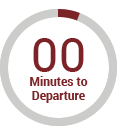
<style>
.page{position:relative;width:117px;height:126px;background:#ffffff}
.page>*{position:absolute;margin:0}
.t1{font:48px "Roboto-Regular";color:#7b2326;text-transform:uppercase}
.t2{font:12px "Roboto-Bold";color:#7b2326}
</style>
<div class="page">
<p class="t1" style="left:33px;top:38px;width:51px;height:34px">00</p>
<p class="t2" style="left:30px;top:76px;width:58px;height:27px;text-align:center">Minutes to<br>Departure</p>
</div>
